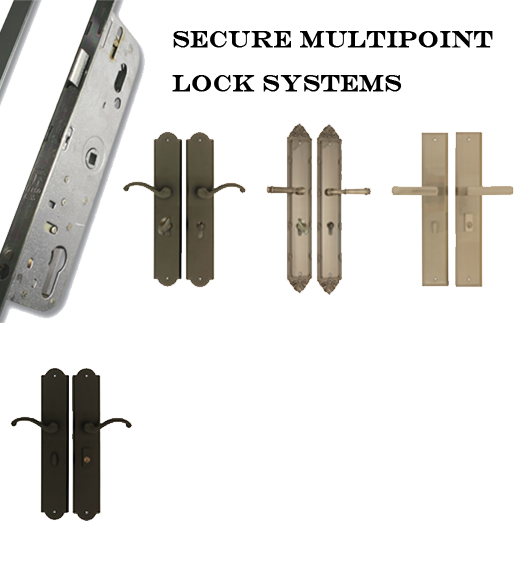
<style>
.page{position:relative;width:514px;height:580px;background:#ffffff}
.page>*{position:absolute;margin:0}
.t1{font:23.7px/50px "EngraversMT";letter-spacing:-0.015em;color:#000000;font-weight:bold;scale:0.94 1}
</style>
<div class="page">
<p class="t1" style="left:172px;top:31px;width:321px;height:61px">SECURE MULTIPOINT<br>LOCK SYSTEMS</p>
</div>
